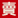
<style>
.page{position:relative;width:18px;height:18px;background:#c10009}
.page>*{position:absolute;margin:0}
.t1{font:14.6px "DFYuan-Bd-HKP-BF";letter-spacing:-0.1em;color:#ece9d8;font-weight:bold}
</style>
<div class="page">
<p class="t1" style="left:2px;top:1px;width:14px;height:15px">賣</p>
</div>
